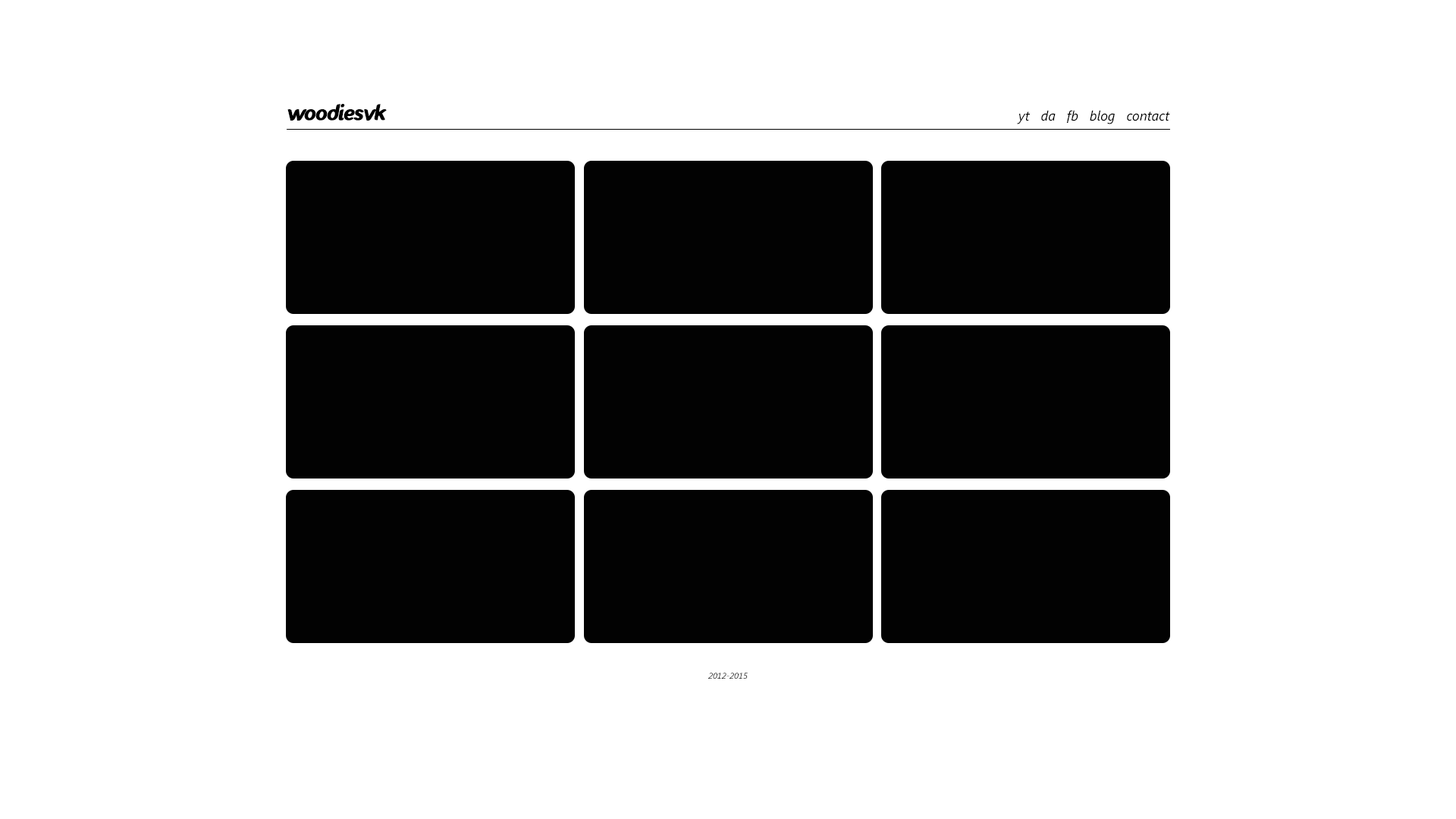
<style>
.page{position:relative;width:1456px;height:819px;background:#ffffff}
.page>*{position:absolute;margin:0}
.t1{font:22.7px "Fontastique-Fontastique";letter-spacing:-0.05em;color:#000000;font-weight:bold;font-style:italic}
.t2{font:13.6px "SegoeUI-Italic";color:#000000}
.t3{font:8.3px "SegoeUI-Italic";color:#000000}
</style>
<div class="page">
<p class="t1" style="left:287px;top:104px;width:100px;height:17px">woodiesvk</p>
<p class="t2" style="left:1017px;top:110px;width:153px;height:14px">yt   da   fb   blog   contact</p>
<p class="t3" style="left:708px;top:673px;width:40px;height:6px">2012-2015</p>
</div>
